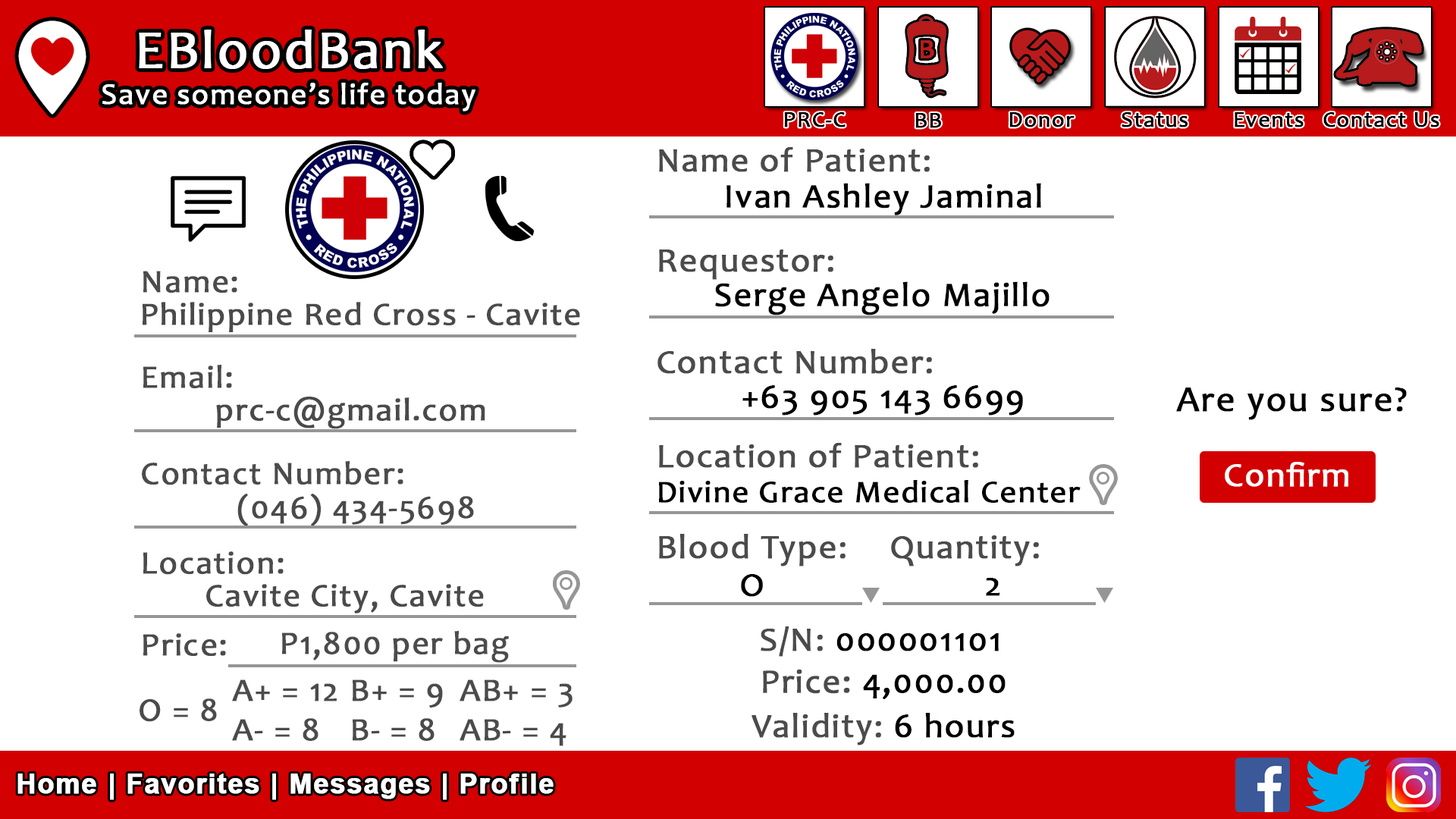
<style>
.page{position:relative;width:1456px;height:819px;background:#ffffff}
.page>*{position:absolute;margin:0}
.t1{font:30.3px "Candara";letter-spacing:0.03em;color:#ffffff;font-weight:bold}
.t2{font:54.6px "Candara";letter-spacing:0.03em;color:#ffffff;font-weight:bold}
.t3{font:22.7px "Candara";letter-spacing:0.03em;color:#000000;font-weight:bold}
.t4{font:34.5px "Candara";letter-spacing:0.03em;color:#4b4b4b;font-weight:bold}
.t5{font:34.3px "Candara";letter-spacing:0.03em;color:#000000;font-weight:bold}
.t6{font:32.8px "Candara";letter-spacing:0.03em;color:#4b4b4b;font-weight:bold}
.t7{font:32.6px "Candara";letter-spacing:0.03em;color:#4a4a4a;font-weight:bold}
.t8{font:36.4px "Candara";letter-spacing:0.03em;color:#000000;font-weight:bold}
.t9{font:34.3px "Candara";letter-spacing:0.03em;color:#ffffff;font-weight:bold}
.t10{font:31.6px "Candara";letter-spacing:0.03em;color:#000000;font-weight:bold}
.t11{font:34.5px "Candara";letter-spacing:0.03em;color:#000000;font-weight:bold}
.t12{font:32.8px "Candara";letter-spacing:0.03em;color:#4a4a4a;font-weight:bold}
.t13{font:34.3px "Candara";letter-spacing:0.03em;color:#4b4b4b;font-weight:bold}
.t14{font:27.3px "Arial-BoldMT";letter-spacing:0.03em;color:#ffffff;font-weight:bold}
</style>
<div class="page">
<p class="t1" style="left:102px;top:30px;width:373px;height:81px;text-align:center"><span class="t2">EBloodBank<br></span>Save someone’s life today</p>
<p class="t3" style="left:784px;top:112px;width:62px;height:15px">PRC-C</p>
<p class="t3" style="left:915px;top:113px;width:26px;height:15px">BB</p>
<p class="t3" style="left:1009px;top:112px;width:66px;height:15px">Donor</p>
<p class="t3" style="left:1122px;top:112px;width:66px;height:15px">Status</p>
<p class="t3" style="left:1235px;top:112px;width:69px;height:15px">Events</p>
<p class="t3" style="left:1323px;top:112px;width:116px;height:15px">Contact Us</p>
<p class="t4" style="left:659px;top:147px;width:271px;height:25px">Name of Patient:</p>
<p class="t5" style="left:726px;top:183px;width:315px;height:32px">Ivan Ashley Jaminal</p>
<p class="t4" style="left:659px;top:249px;width:174px;height:31px">Requestor:</p>
<p class="t6" style="left:143px;top:271px;width:94px;height:22px">Name:</p>
<p class="t5" style="left:715px;top:281px;width:335px;height:34px">Serge Angelo Majillo</p>
<p class="t7" style="left:143px;top:302px;width:437px;height:30px">Philippine Red Cross - Cavite</p>
<p class="t4" style="left:657px;top:349px;width:275px;height:25px">Contact Number:</p>
<p class="t6" style="left:143px;top:365px;width:89px;height:23px">Email:</p>
<p class="t5" style="left:742px;top:385px;width:281px;height:31px">+63 905 143 6699</p>
<p class="t8" style="left:1176px;top:388px;width:231px;height:32px">Are you sure?</p>
<p class="t7" style="left:216px;top:397px;width:269px;height:32px">prc-c@gmail.com</p>
<p class="t4" style="left:659px;top:443px;width:319px;height:25px">Location of Patient:</p>
<p class="t6" style="left:142px;top:461px;width:261px;height:24px">Contact Number:</p>
<p class="t9" style="left:1225px;top:462px;width:123px;height:25px">Confirm</p>
<p class="t10" style="left:659px;top:480px;width:422px;height:23px">Divine Grace Medical Center</p>
<p class="t7" style="left:237px;top:494px;width:237px;height:32px">(046) 434-5698</p>
<p class="t4" style="left:659px;top:534px;width:187px;height:32px">Blood Type:</p>
<p class="t4" style="left:891px;top:535px;width:148px;height:31px">Quantity:</p>
<p class="t6" style="left:143px;top:551px;width:141px;height:24px">Location:</p>
<p class="t11" style="left:741px;top:574px;width:22px;height:23px">O</p>
<p class="t11" style="left:986px;top:578px;width:14px;height:18px">2</p>
<p class="t12" style="left:206px;top:584px;width:278px;height:29px">Cavite City, Cavite</p>
<p class="t11" style="left:761px;top:626px;width:238px;height:31px"><span class="t4">S/N: </span>000001101</p>
<p class="t6" style="left:143px;top:633px;width:83px;height:23px">Price:</p>
<p class="t6" style="left:282px;top:631px;width:227px;height:32px">P1,800 per bag</p>
<p class="t5" style="left:763px;top:669px;width:243px;height:30px"><span class="t13">Price: </span>4,000.00</p>
<p class="t6" style="left:232px;top:679px;width:105px;height:62px">A+ = 12<br>A- = 8</p>
<p class="t6" style="left:353px;top:679px;width:90px;height:62px">B+ = 9<br>B- = 8</p>
<p class="t6" style="left:460px;top:679px;width:113px;height:67px">AB+ = 3<br>AB- = 4</p>
<p class="t6" style="left:140px;top:698px;width:77px;height:24px">O = 8</p>
<p class="t4" style="left:751px;top:713px;width:264px;height:32px">Validity: <span class="t11">6 hours</span></p>
<p class="t14" style="left:17px;top:773px;width:537px;height:27px">Home | Favorites | Messages | Profile</p>
</div>
